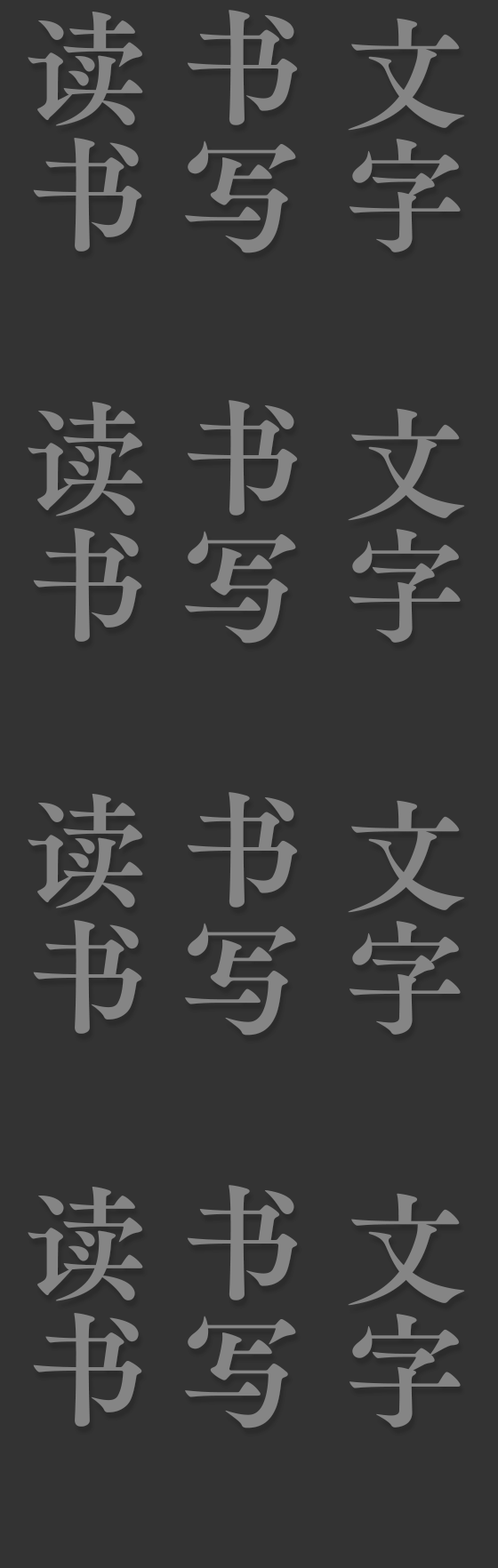
<style>
.page{position:relative;width:498px;height:1568px;background:#333333}
.page>*{position:absolute;margin:0}
.t1{font:125.9px "FZFW-ZhuZiAOldMin-B--GB1-0";color:#858585}
.t2{font:127.7px "FZFW-ZhuZiAOldMin-B--GB1-0";color:#858585}
.t3{font:123.3px "FZFW-ZhuZiAOldMin-B--GB1-0";color:#858585}
</style>
<div class="page">
<p class="t1" style="left:28px;top:12px;width:115px;height:240px">读书</p>
<p class="t2" style="left:185px;top:10px;width:113px;height:243px">书写</p>
<p class="t3" style="left:348px;top:18px;width:117px;height:234px">文字</p>
<p class="t1" style="left:28px;top:402px;width:115px;height:240px">读书</p>
<p class="t2" style="left:185px;top:400px;width:113px;height:244px">书写</p>
<p class="t3" style="left:348px;top:408px;width:117px;height:235px">文字</p>
<p class="t1" style="left:28px;top:794px;width:115px;height:240px">读书</p>
<p class="t2" style="left:185px;top:792px;width:113px;height:244px">书写</p>
<p class="t3" style="left:348px;top:800px;width:117px;height:235px">文字</p>
<p class="t1" style="left:28px;top:1187px;width:115px;height:240px">读书</p>
<p class="t2" style="left:185px;top:1185px;width:113px;height:243px">书写</p>
<p class="t3" style="left:348px;top:1193px;width:117px;height:235px">文字</p>
</div>
